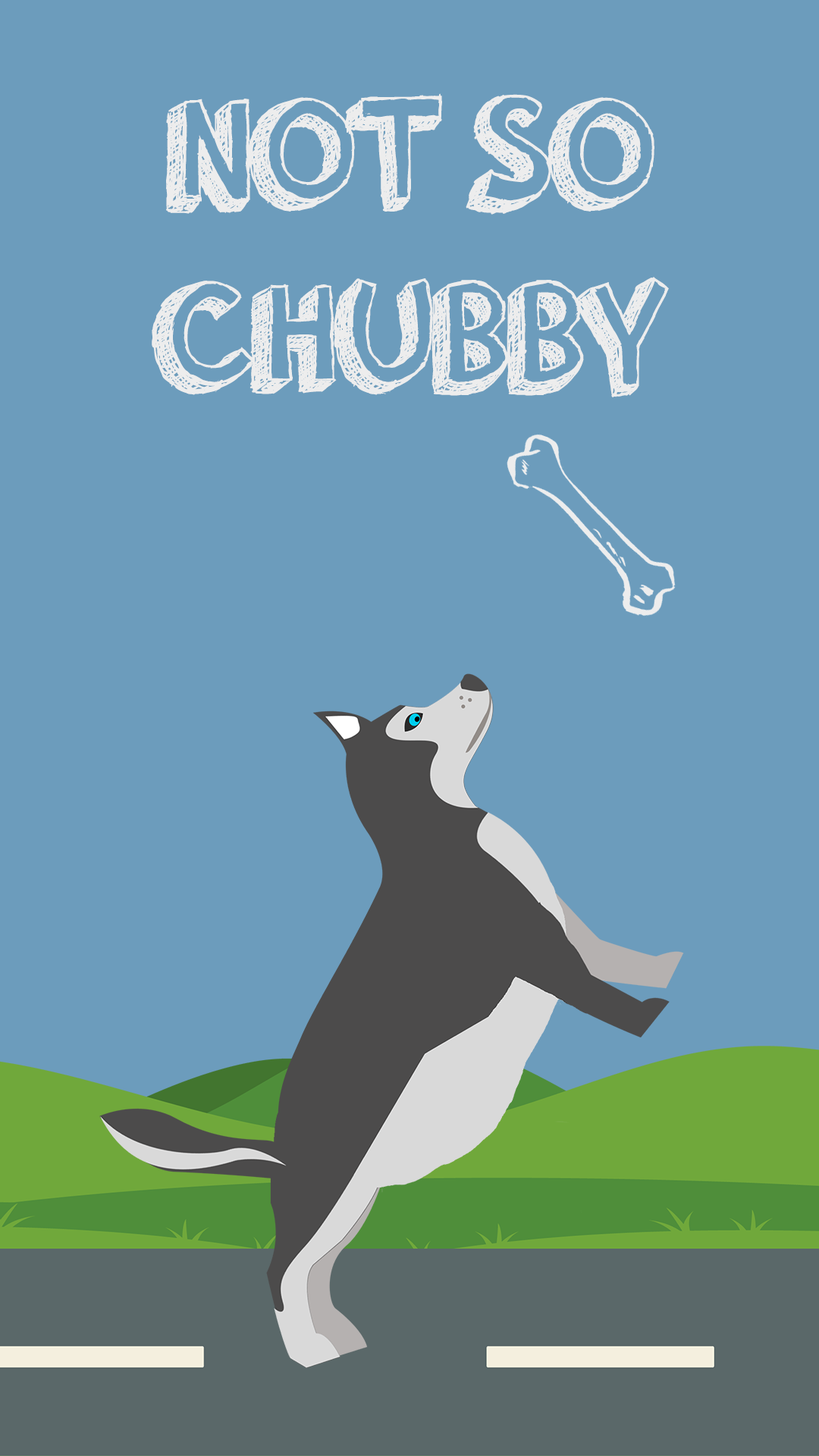
<style>
.page{position:relative;width:819px;height:1456px;background:#6c9cbc}
.page>*{position:absolute;margin:0}
.t1{font:160.3px "orangejuice";color:#ededed;scale:0.95 1}
</style>
<div class="page">
<p class="t1" style="left:152px;top:93px;width:517px;height:304px;text-align:center">NOT SO<br>CHUBBY</p>
</div>
